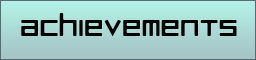
<style>
.page{position:relative;width:256px;height:60px}
.page>*{position:absolute;margin:0}
.t1{font:30px "RazerRegular";color:#000000}
</style>
<div class="page">
<p class="t1" style="left:21px;top:13px;width:216px;height:23px">Achievements</p>
</div>
